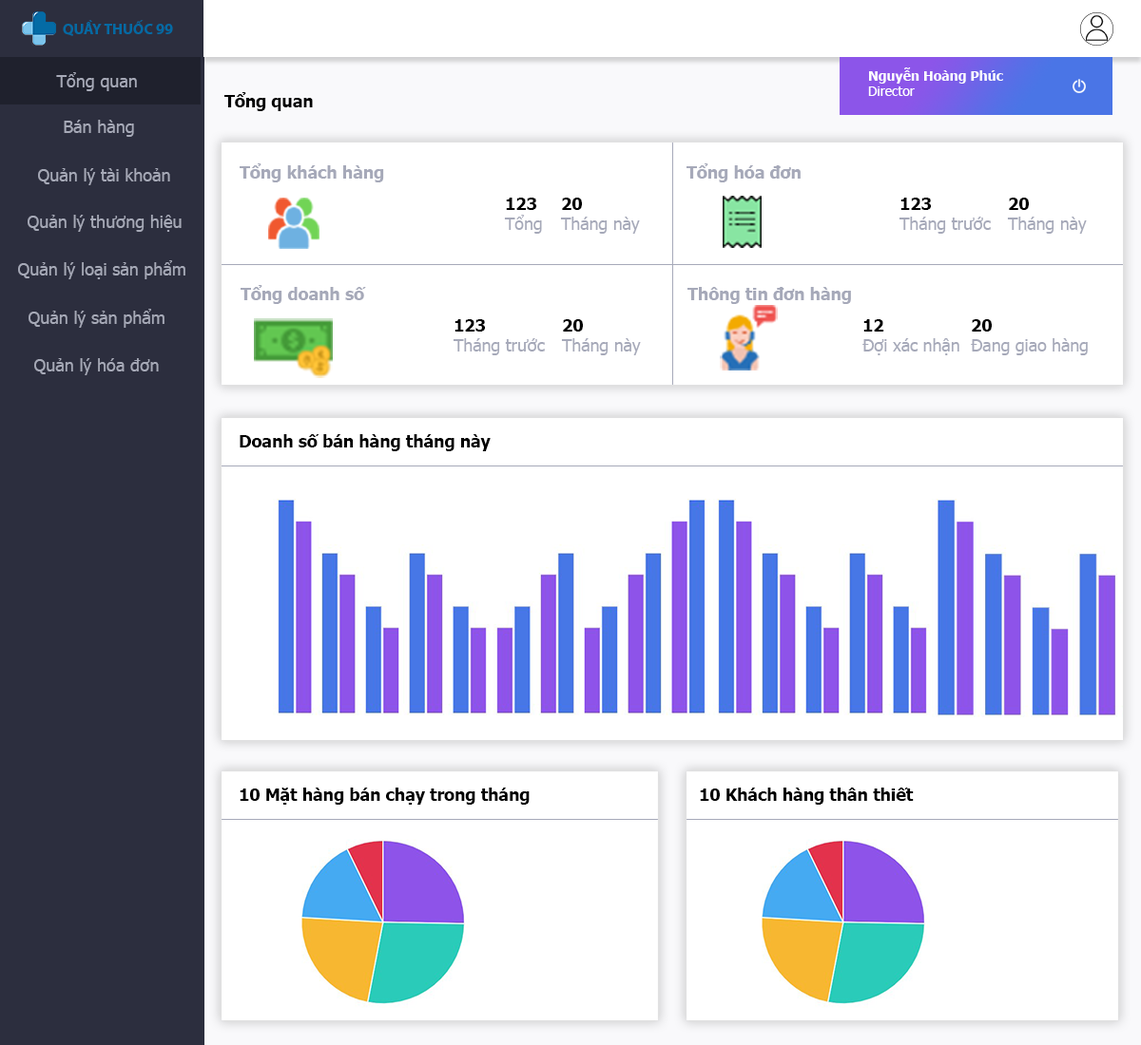
<style>
.page{position:relative;width:1141px;height:1045px;background:#ffffff}
.page>*{position:absolute;margin:0}
.t1{font:15.2px "MyriadPro-Bold";color:#036aa4}
.t2{font:17.1px "Tahoma";color:#a6a9b7}
.t3{font:13.3px "Tahoma-Bold";color:#ffffff}
.t4{font:13.3px "Tahoma";color:#ffffff}
.t5{font:17.1px "Tahoma-Bold";color:#010101}
.t6{font:16.8px "Tahoma-Bold";color:#a6a9b9}
.t7{font:16.8px "Tahoma";color:#a6a9b9}
.t8{font:16.8px "Tahoma-Bold";color:#000000}
</style>
<div class="page">
<p class="t1" style="left:63px;top:20px;width:110px;height:16px">QUẦY THUỐC 99</p>
<p class="t2" style="left:56px;top:72px;width:81px;height:19px">Tổng quan</p>
<p class="t3" style="left:868px;top:67px;width:135px;height:29px">Nguyễn Hoàng Phúc<br><span class="t4">Director</span></p>
<p class="t5" style="left:224px;top:92px;width:89px;height:19px">Tổng quan</p>
<p class="t2" style="left:64px;top:120px;width:70px;height:17px">Bán hàng</p>
<p class="t2" style="left:38px;top:168px;width:132px;height:17px">Quản lý tài khoản</p>
<p class="t6" style="left:240px;top:163px;width:144px;height:19px">Tổng khách hàng</p>
<p class="t6" style="left:686px;top:163px;width:114px;height:19px">Tổng hóa đơn</p>
<p class="t7" style="left:504px;top:198px;width:38px;height:36px"><span class="t8">123<br></span>Tổng</p>
<p class="t7" style="left:560px;top:198px;width:80px;height:36px"><span class="t8">20<br></span>Tháng này</p>
<p class="t7" style="left:898px;top:198px;width:92px;height:36px"><span class="t8">123<br></span>Tháng trước</p>
<p class="t7" style="left:1007px;top:198px;width:79px;height:36px"><span class="t8">20<br></span>Tháng này</p>
<p class="t2" style="left:28px;top:215px;width:154px;height:17px">Quản lý thương hiệu</p>
<p class="t2" style="left:18px;top:260px;width:167px;height:19px">Quản lý loại sản phẩm</p>
<p class="t6" style="left:240px;top:285px;width:126px;height:19px">Tổng doanh số</p>
<p class="t6" style="left:687px;top:287px;width:164px;height:17px">Thông tin đơn hàng</p>
<p class="t2" style="left:29px;top:309px;width:135px;height:19px">Quản lý sản phẩm</p>
<p class="t7" style="left:452px;top:319px;width:93px;height:36px"><span class="t8">123<br></span>Tháng trước</p>
<p class="t7" style="left:561px;top:319px;width:80px;height:36px"><span class="t8">20<br></span>Tháng này</p>
<p class="t7" style="left:862px;top:319px;width:97px;height:36px"><span class="t8">12<br></span>Đợi xác nhận</p>
<p class="t7" style="left:970px;top:319px;width:117px;height:36px"><span class="t8">20<br></span>Đang giao hàng</p>
<p class="t2" style="left:34px;top:358px;width:125px;height:17px">Quản lý hóa đơn</p>
<p class="t8" style="left:240px;top:434px;width:250px;height:17px">Doanh số bán hàng tháng này</p>
<p class="t8" style="left:240px;top:788px;width:289px;height:17px">10 Mặt hàng bán chạy trong tháng</p>
<p class="t8" style="left:700px;top:788px;width:213px;height:17px">10 Khách hàng thân thiết</p>
</div>
